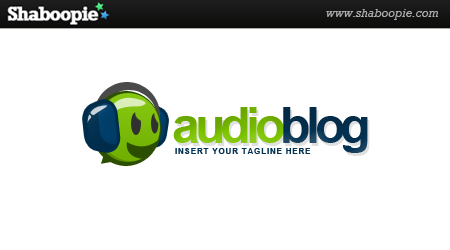
<style>
.page{position:relative;width:450px;height:250px;background:#ffffff}
.page>*{position:absolute;margin:0}
.t1{font:50px "Arial-BoldMT";letter-spacing:-0.1em;color:#7dc400}
.t2{font:50px "Arial-BoldMT";letter-spacing:-0.1em;color:#043252}
.t3{font:8.3px "Arial-BoldMT";letter-spacing:0.075em;color:#043252}
</style>
<div class="page">
<p class="t1" style="left:173px;top:107px;width:195px;height:46px">audio<span class="t2">blog</span></p>
<p class="t3" style="left:175px;top:148px;width:136px;height:6px">INSERT YOUR TAGLINE HERE</p>
</div>
